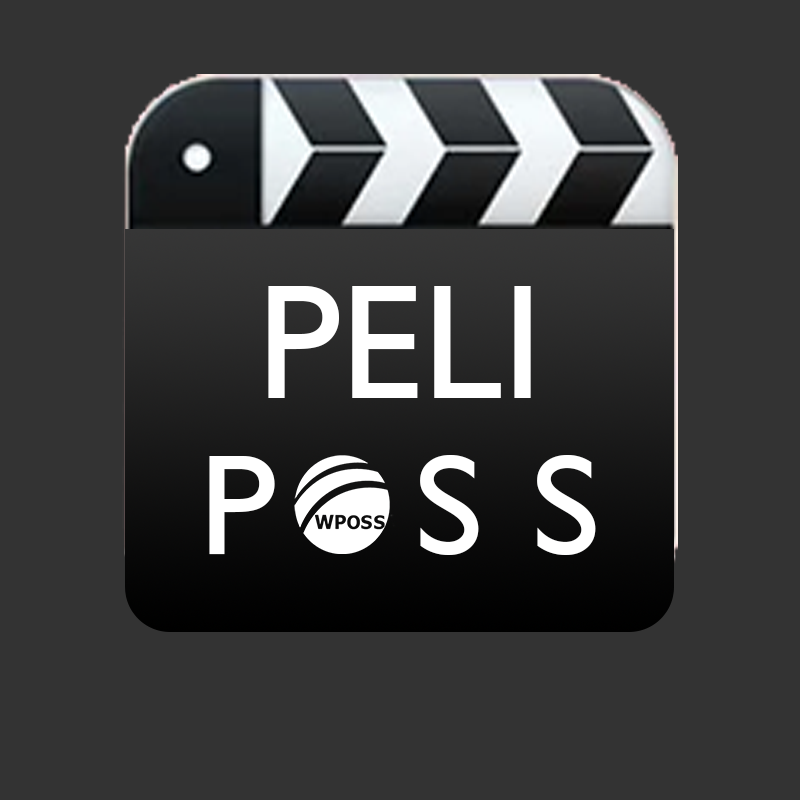
<style>
.page{position:relative;width:800px;height:800px;background:#333333}
.page>*{position:absolute;margin:0}
.t1{font:163.8px "GillSansMT";color:#ffffff}
.t2{font:143.2px "GillSansMT";letter-spacing:0.32em;color:#ffffff;scale:1.05 1}
</style>
<div class="page">
<p class="t1" style="left:268px;top:286px;width:263px;height:112px">PELI</p>
<p class="t2" style="left:209px;top:455px;width:387px;height:100px">P SS</p>
</div>
